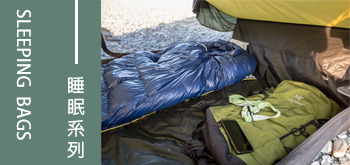
<style>
.page{position:relative;width:350px;height:165px;background:#5f8073}
.page>*{position:absolute;margin:0}
.t1{font:18px "AdobeFanHeitiStd-Bold";color:#fefefe}
</style>
<div class="page">
<p class="t1" style="left:16px;top:9px;width:15px;height:131px">SLEEPING  BAGS</p>
<p class="t1" style="left:67px;top:76px;width:18px;height:82px">睡<br>眠<br>系<br>列</p>
</div>
